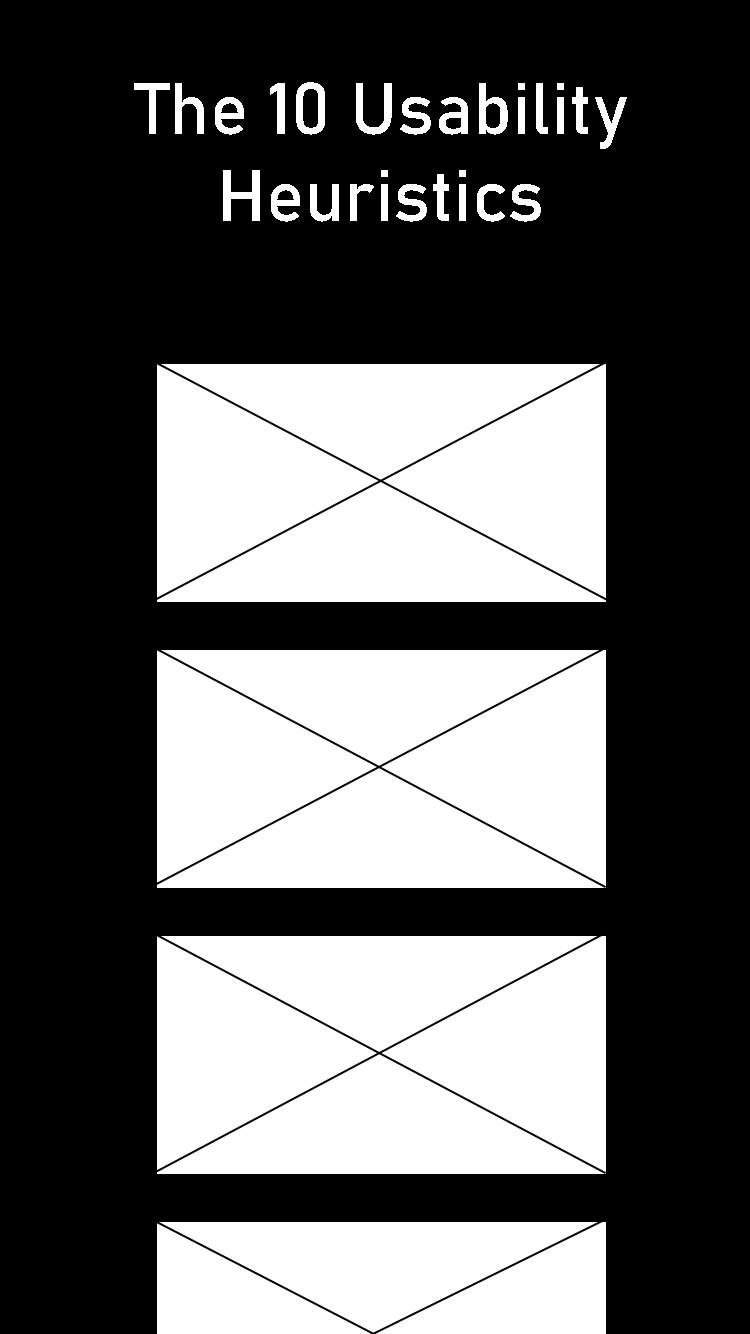
<style>
.page{position:relative;width:750px;height:1334px;background:#000000}
.page>*{position:absolute;margin:0}
.t1{font:72px "Bahnschrift";color:#ffffff}
</style>
<div class="page">
<p class="t1" style="left:134px;top:82px;width:493px;height:140px;text-align:center">The 10 Usability Heuristics</p>
</div>
